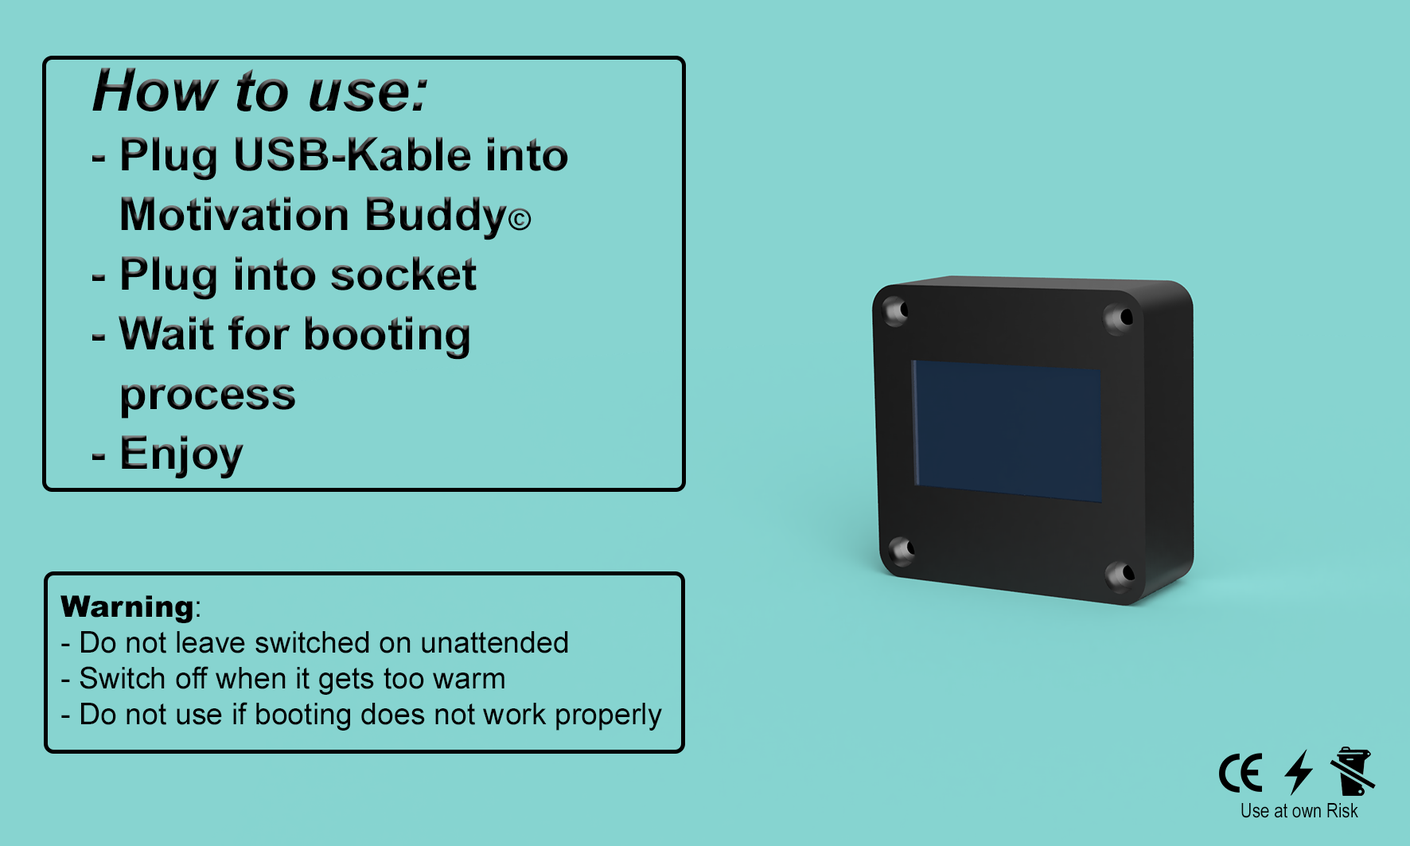
<style>
.page{position:relative;width:1410px;height:846px;background:#87d4d0}
.page>*{position:absolute;margin:0}
.t1{font:46.4px/59.7px "Arial-BoldMT";color:#000000}
.t2{font:59.7px/59.7px "Arial-BoldItalicMT";color:#000000}
.t3{font:29.8px/59.7px "Arial-BoldMT";color:#000000}
.t4{font:29.8px "ArialMT";color:#000000}
.t5{font:29.8px "Arial-Black";color:#000000}
.t6{font:19.9px "ArialNarrow";color:#000000}
</style>
<div class="page">
<p class="t1" style="left:92px;top:68px;width:476px;height:411px"><span class="t2">How to use:<br></span>- Plug USB-Kable into<br> Motivation Buddy<span class="t3">©<br></span>- Plug into socket<br>- Wait for booting<br> process <br>- Enjoy</p>
<p class="t4" style="left:60px;top:595px;width:602px;height:135px"><span class="t5">Warning</span>: <br>- Do not leave switched on unattended <br>- Switch off when it gets too warm<br>- Do not use if booting does not work properly</p>
<p class="t6" style="left:1241px;top:803px;width:117px;height:15px">Use at own Risk</p>
</div>
